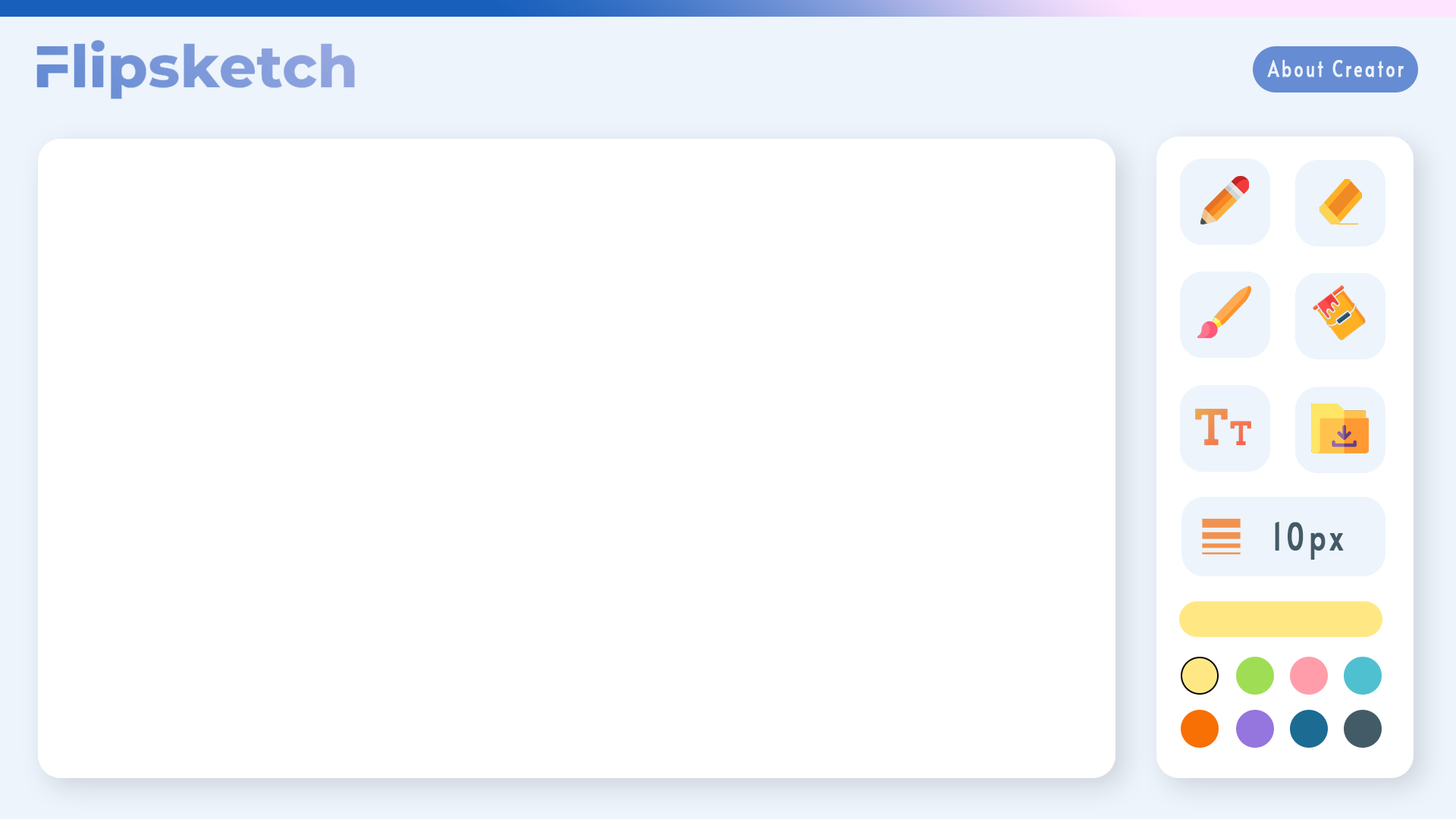
<style>
.page{position:relative;width:1456px;height:819px;background:#ffffff}
.page>*{position:absolute;margin:0}
.t1{font:22.2px "Alata-Regular";letter-spacing:0.136em;color:#edf4fc;font-weight:bold;scale:0.73 1}
.t2{font:37.5px "Alata-Regular";letter-spacing:0.136em;color:#435b66;font-weight:bold;scale:0.73 1}
</style>
<div class="page">
<p class="t1" style="left:1267px;top:60px;width:137px;height:17px">About Creator</p>
<p class="t2" style="left:1275px;top:522px;width:69px;height:38px">10px</p>
</div>
